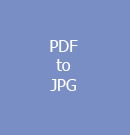
<style>
.page{position:relative;width:130px;height:135px;background:#788ec5}
.page>*{position:absolute;margin:0}
.t1{font:12px "Tahoma";color:#fcfcfa}
</style>
<div class="page">
<p class="t1" style="left:50px;top:40px;width:28px;height:51px;text-align:center">PDF<br>to<br>JPG</p>
</div>
